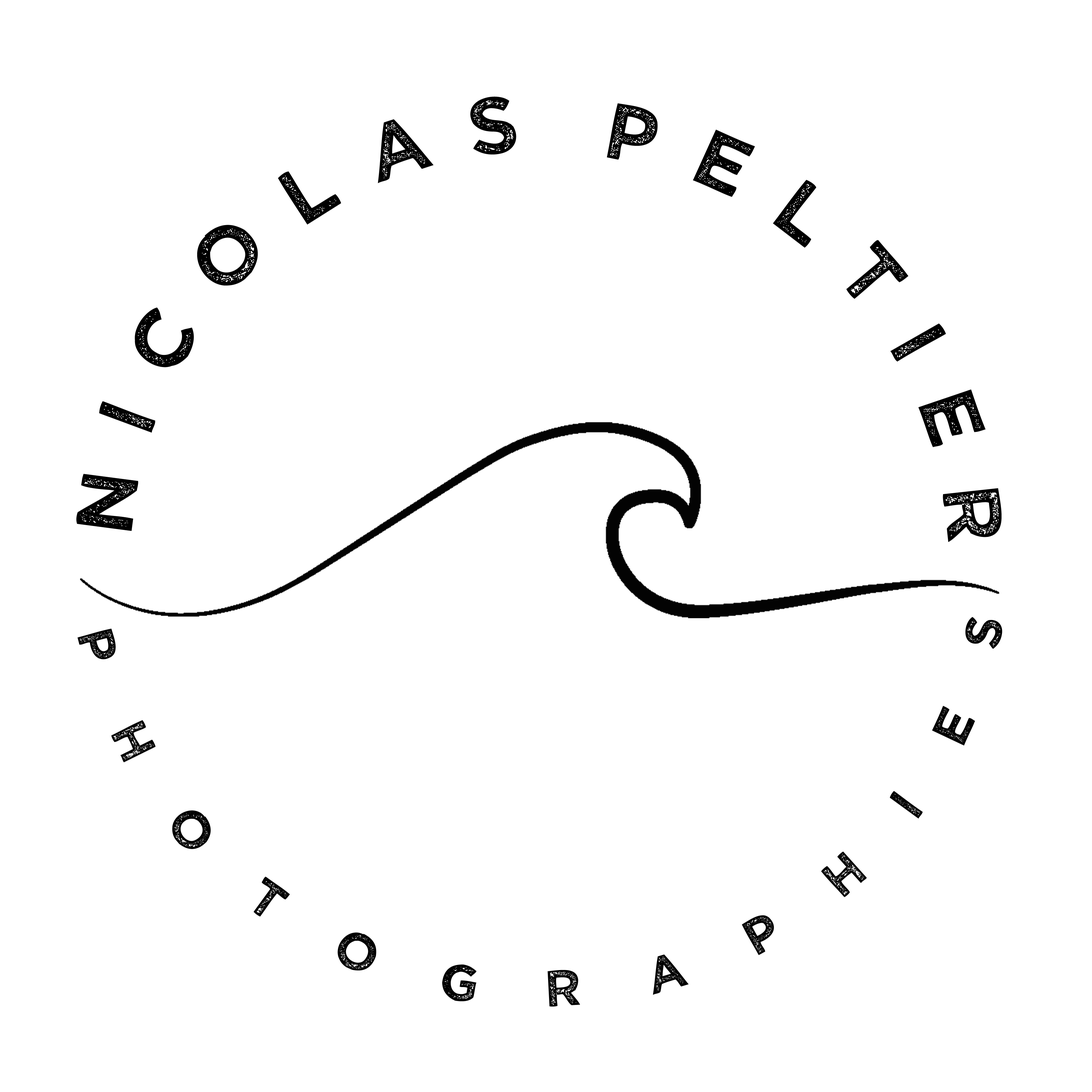
<style>
.page{position:relative;width:1092px;height:1092px;background:#ffffff}
.page>*{position:absolute;margin:0}
.t1{font:80.7px "WickedGrit";letter-spacing:0.45em;color:#000000}
.t2{font:51.2px "WickedGrit";letter-spacing:0.53em;color:#000000}
</style>
<div class="page">
<p class="t1" style="left:76px;top:96px;width:926px;height:446px;rotate:-1deg">NICOLAS PELTIER</p>
<p class="t2" style="left:77px;top:617px;width:925px;height:390px;rotate:4deg">P H O T O G R A P H I E S</p>
</div>
